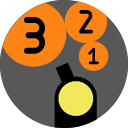
<style>
.page{position:relative;width:128px;height:128px;background:#595858}
.page>*{position:absolute;margin:0}
.t1{font:57.5px "zAristaLight";color:#000000;font-variant:small-caps;scale:0.96 1}
.t2{font:36.9px "zAristaLight";color:#000000;font-variant:small-caps;scale:0.96 1}
.t3{font:25.7px "zAristaLight";color:#000000;font-variant:small-caps;scale:0.96 1}
</style>
<div class="page">
<p class="t1" style="left:24px;top:17px;width:21px;height:37px">3</p>
<p class="t2" style="left:79px;top:10px;width:14px;height:24px">2</p>
<p class="t3" style="left:88px;top:47px;width:11px;height:18px">1</p>
</div>
